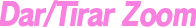
<style>
.page{position:relative;width:196px;height:28px;background:#ffffff}
.page>*{position:absolute;margin:0}
.t1{font:32px "RodinPro-EB";letter-spacing:-0.055em;color:#f880de;font-style:italic;scale:0.85 1}
</style>
<div class="page">
<p class="t1" style="left:0px;top:0px;width:197px;height:27px">Dar/Tirar Zoom</p>
</div>
